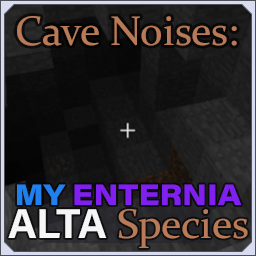
<style>
.page{position:relative;width:256px;height:256px}
.page>*{position:absolute;margin:0}
.t1{font:41.7px "Constantia";color:#b97a57}
.t2{font:29.2px/25px "AcuminConcept_760.000wght_112.000wdth";color:#8020f0}
.t3{font:29.2px/25px "AcuminConcept_760.000wght_112.000wdth";color:#2080f0}
.t4{font:41.7px/33.3px "AcuminConcept-Bold";color:#f6f6f6}
.t5{font:41.7px/33.3px "Constantia";color:#b97a57}
</style>
<div class="page">
<p class="t1" style="left:17px;top:16px;width:220px;height:30px">Cave Noises:</p>
<p class="t2" style="left:8px;top:184px;width:240px;height:64px;text-align:center"><span class="t3">MY </span>ENTERNIA<br><span class="t4">ALTA</span><span class="t5"> Species</span></p>
</div>
